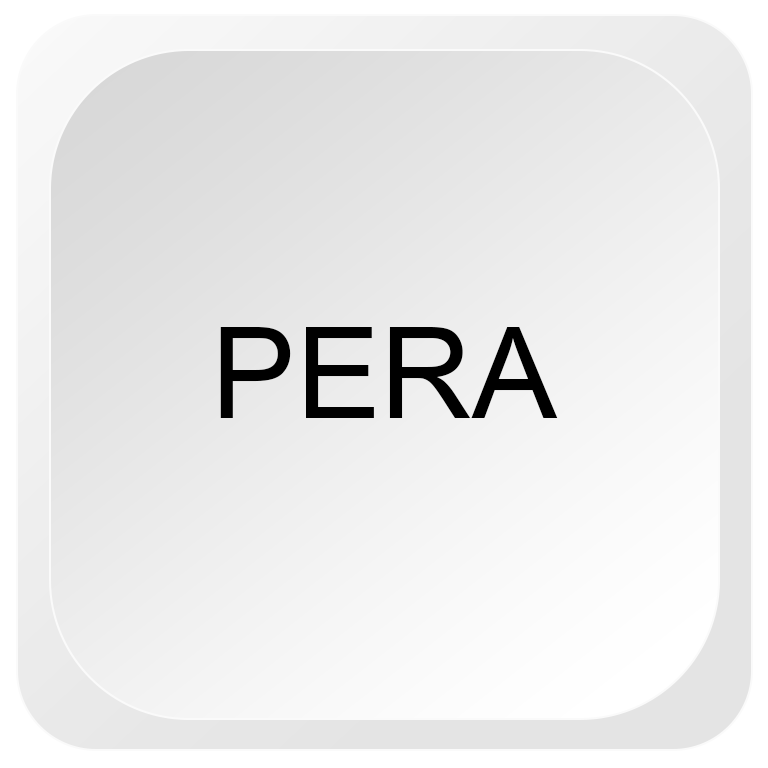
<style>
.page{position:relative;width:768px;height:768px}
.page>*{position:absolute;margin:0}
.t1{font:127px "ArialMT";color:#000000}
</style>
<div class="page">
<p class="t1" style="left:220px;top:327px;width:338px;height:91px">PERA</p>
</div>
